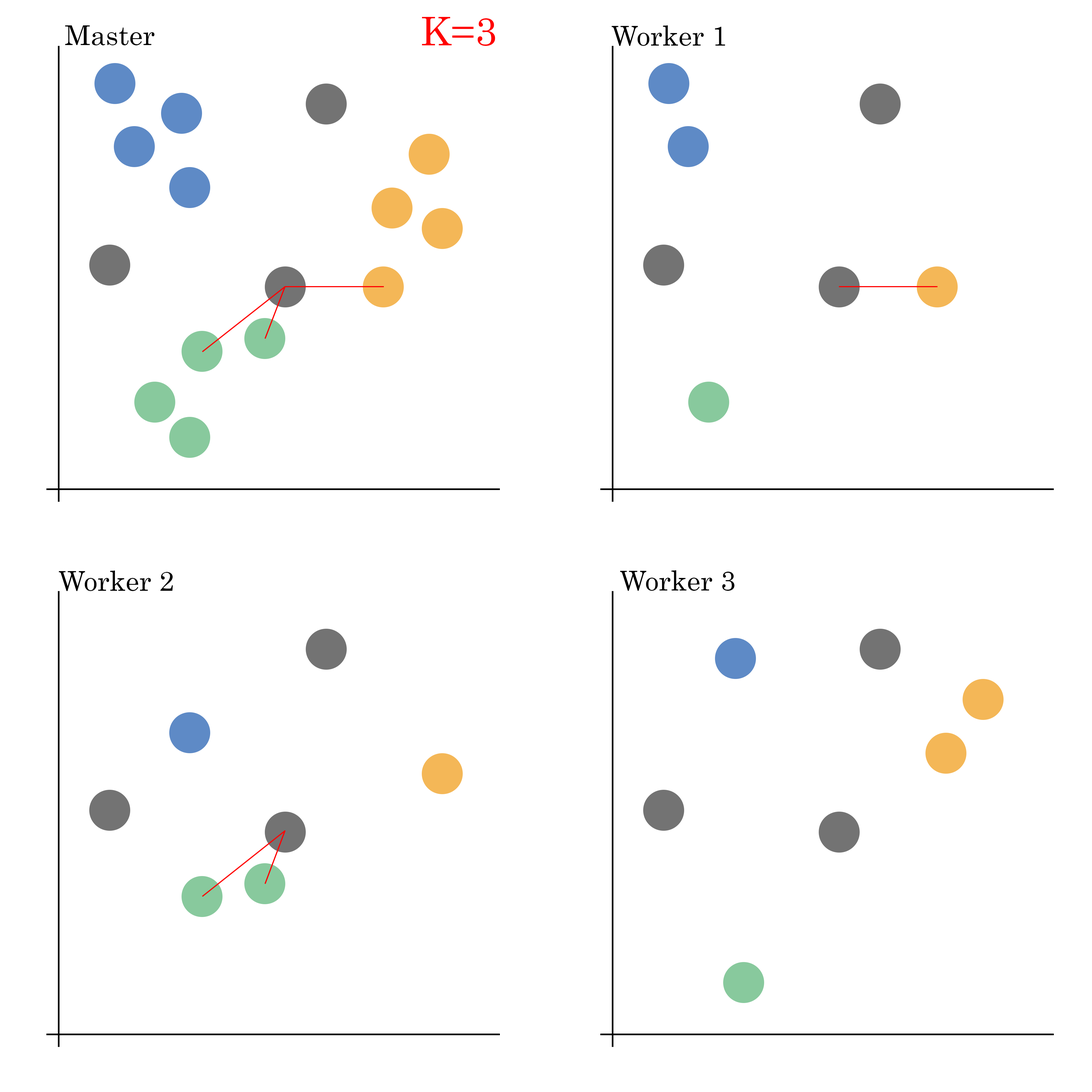
<style>
.page{position:relative;width:1092px;height:1092px;background:#ffffff}
.page>*{position:absolute;margin:0}
.t1{font:39.3px "Century";color:#ff0000}
.t2{font:27.3px "Century";color:#000000}
</style>
<div class="page">
<p class="t1" style="left:422px;top:17px;width:73px;height:29px">K=3</p>
<p class="t2" style="left:65px;top:25px;width:90px;height:20px">Master</p>
<p class="t2" style="left:612px;top:25px;width:113px;height:21px">Worker 1</p>
<p class="t2" style="left:59px;top:571px;width:114px;height:20px">Worker 2</p>
<p class="t2" style="left:620px;top:570px;width:114px;height:21px">Worker 3</p>
</div>
